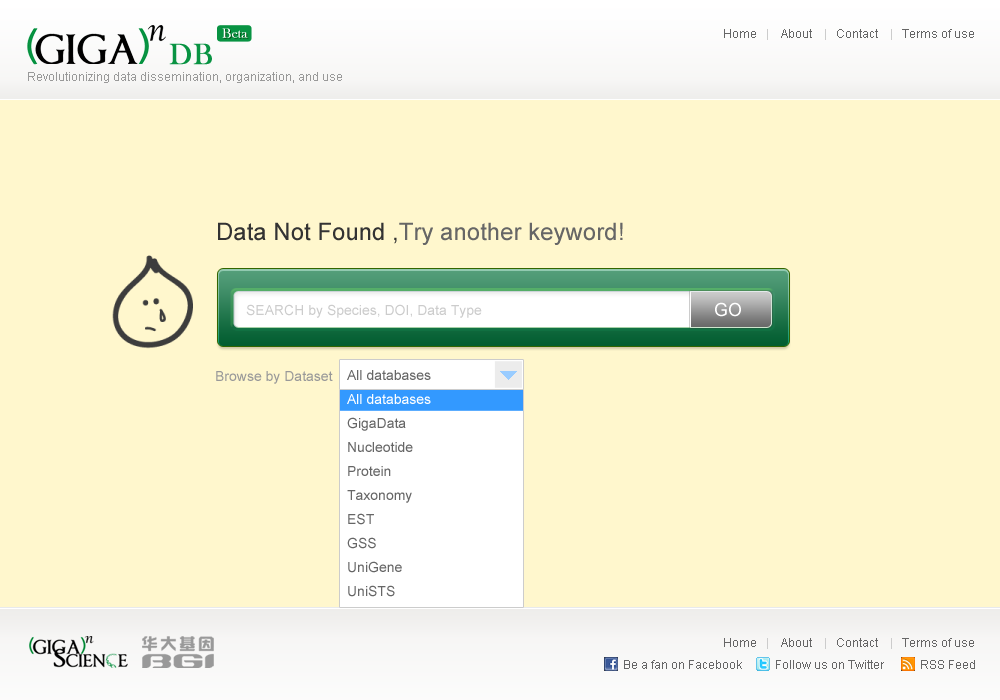
<style>
.page{position:relative;width:1000px;height:700px;background:#fff7cd}
.page>*{position:absolute;margin:0}
.t1{font:14px "BaskOldFace";color:#ffffff}
.t2{font:12px "ArialMT";color:#666666}
.t3{font:12px "ArialMT";color:#cccccc}
.t4{font:30px "BaskOldFace";color:#089342;font-weight:bold}
.t5{font:12px "ArialMT";color:#999999}
.t6{font:24px "ArialMT";color:#666666}
.t7{font:24px "ArialMT";color:#333333}
.t8{font:14px "ArialMT";color:#cccccc}
.t9{font:18px "ArialMT";color:#ffffff}
.t10{font:14px "ArialMT";color:#999999}
.t11{font:14px/24px "ArialMT";color:#666666}
.t12{font:14px/24px "ArialMT";color:#ffffff}
</style>
<div class="page">
<p class="t1" style="left:222px;top:28px;width:26px;height:10px">Beta</p>
<p class="t2" style="left:724px;top:29px;width:250px;height:11px">Home<span class="t3">   |    </span>About <span class="t3">   |   </span>Contact<span class="t3">    |   </span>Terms of use</p>
<p class="t4" style="left:169px;top:43px;width:43px;height:22px">DB</p>
<p class="t5" style="left:28px;top:72px;width:314px;height:11px">Revolutionizing data dissemination, organization, and use</p>
<p class="t6" style="left:218px;top:222px;width:405px;height:23px"><span class="t7">Data Not Found ,</span>Try another keyword!</p>
<p class="t8" style="left:246px;top:304px;width:236px;height:14px">SEARCH by Species, DOI, Data Type</p>
<p class="t9" style="left:715px;top:302px;width:26px;height:15px">GO</p>
<p class="t10" style="left:216px;top:371px;width:117px;height:13px">Browse by Dataset</p>
<p class="t11" style="left:347px;top:370px;width:84px;height:227px">All databases<br><span class="t12">All databases<br></span>GigaData<br>Nucleotide<br>Protein<br>Taxonomy<br>EST<br>GSS<br>UniGene<br>UniSTS</p>
<p class="t2" style="left:724px;top:638px;width:250px;height:11px">Home<span class="t3">   |    </span>About <span class="t3">   |   </span>Contact<span class="t3">    |   </span>Terms of use</p>
<p class="t2" style="left:624px;top:660px;width:351px;height:9px">Be a fan on Facebook           Follow us on Twitter            RSS Feed</p>
</div>
